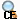
<style>
.page{position:relative;width:20px;height:20px;background:#fcfaf9}
.page>*{position:absolute;margin:0}
.t1{font:11px "BellGothicStd-Bold";letter-spacing:-0.1em;color:#000000;font-weight:bold}
</style>
<div class="page">
<p class="t1" style="left:4px;top:11px;width:13px;height:8px">CE</p>
</div>
